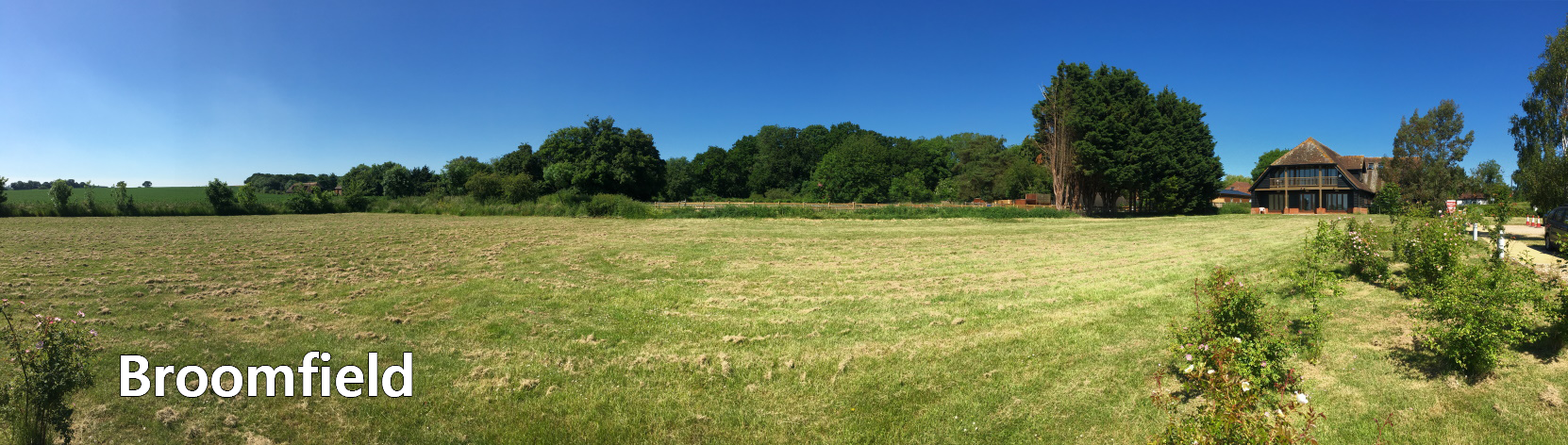
<style>
.page{position:relative;width:1568px;height:445px}
.page>*{position:absolute;margin:0}
.t1{font:56.6px "MalgunGothicBold";color:#ffffff}
</style>
<div class="page">
<p class="t1" style="left:121px;top:352px;width:291px;height:45px">Broomfield</p>
<p class="t1" style="left:121px;top:352px;width:291px;height:45px">Broomfield</p>
</div>
